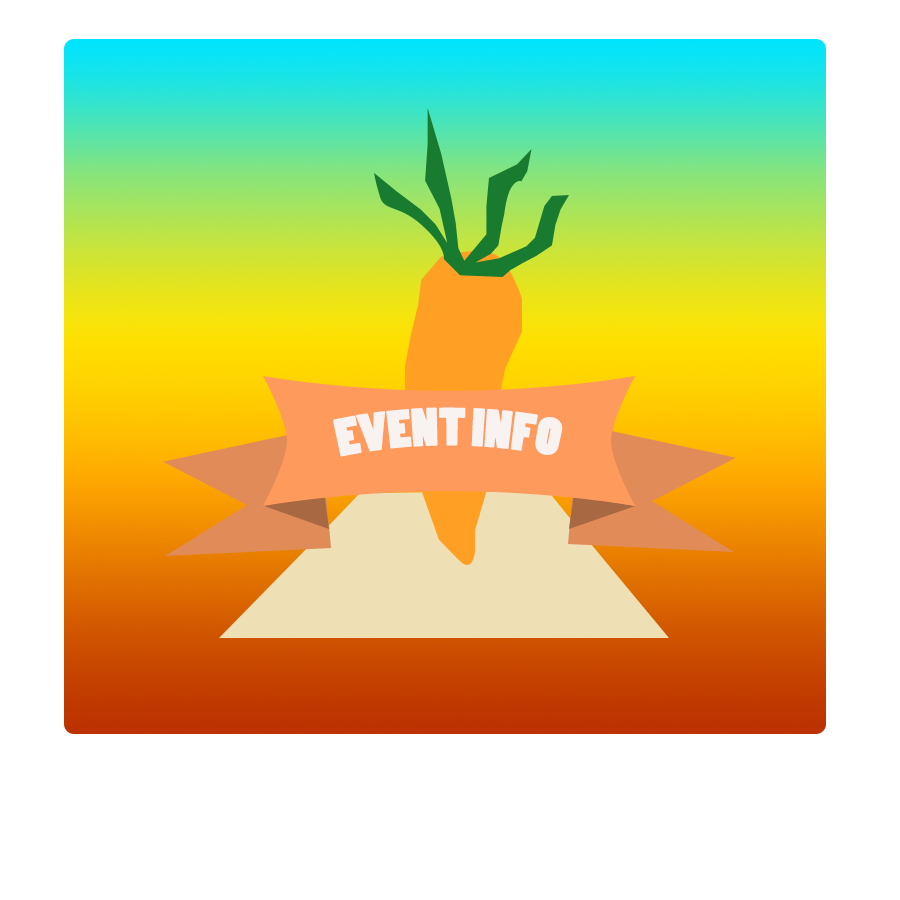
<style>
.page{position:relative;width:900px;height:900px;background:#ffffff}
.page>*{position:absolute;margin:0}
.t1{font:12px "PoplarStd";color:#f8f3f0}
</style>
<div class="page">
<p class="t1" style="left:333px;top:407px;width:230px;height:50px;text-align:center">EVENT INFO</p>
</div>
